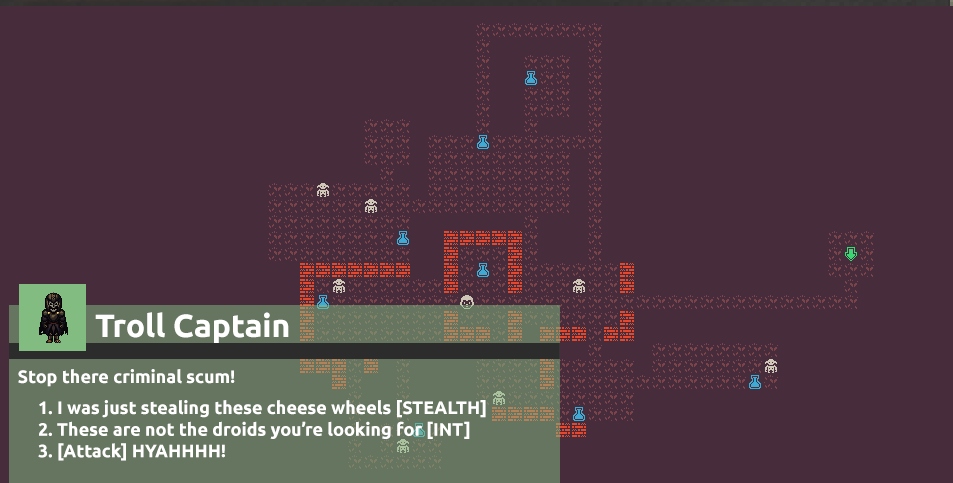
<style>
.page{position:relative;width:953px;height:483px;background:#472d3c}
.page>*{position:absolute;margin:0}
.t1{font:32px "Ubuntu-Bold";color:#ffffff}
.t2{font:18px "Ubuntu-Bold";color:#ffffff}
</style>
<div class="page">
<p class="t1" style="left:95px;top:312px;width:194px;height:31px">Troll Captain</p>
<p class="t2" style="left:18px;top:369px;width:217px;height:18px">Stop there criminal scum!</p>
<p class="t2" style="left:38px;top:400px;width:448px;height:61px">1. I was just stealing these cheese wheels [STEALTH]<br>2. These are not the droids you’re looking for [INT]<br>3. [Attack] HYAHHHH!</p>
</div>
